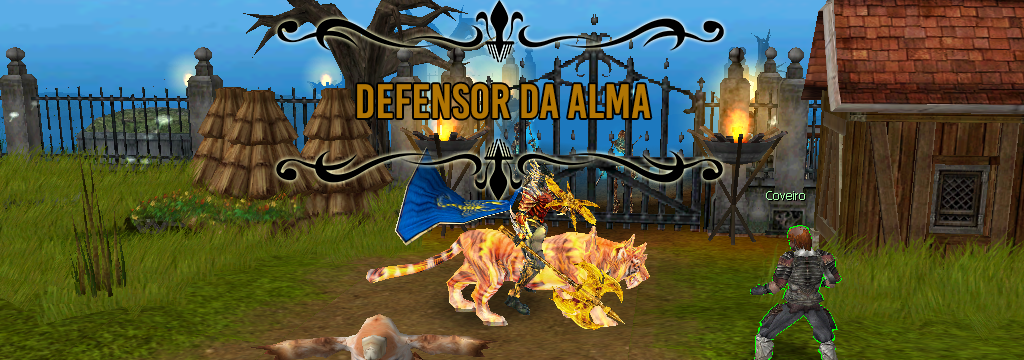
<style>
.page{position:relative;width:1024px;height:360px}
.page>*{position:absolute;margin:0}
.t1{font:48px "BebasKai";color:#b07504}
</style>
<div class="page">
<p class="t1" style="left:357px;top:83px;width:294px;height:36px">Defensor da alma</p>
</div>
